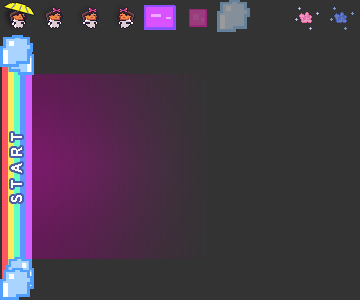
<style>
.page{position:relative;width:360px;height:300px;background:#333333}
.page>*{position:absolute;margin:0}
.t1{font:16px "Cabin-SemiBold";letter-spacing:0.4em;color:#ffffff}
</style>
<div class="page">
<p class="t1" style="left:11px;top:133px;width:11px;height:69px;rotate:-90deg">START</p>
</div>
